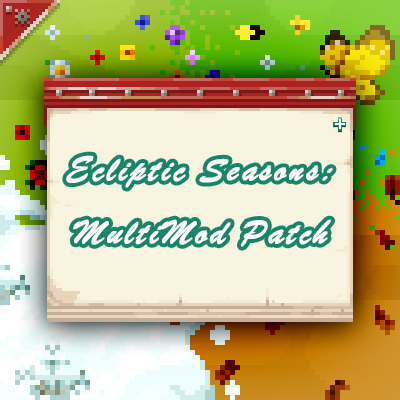
<style>
.page{position:relative;width:400px;height:400px;background:#f8f4e0}
.page>*{position:absolute;margin:0}
.t1{font:36px "STXingkai";letter-spacing:0.075em;color:#ffffff;font-weight:bold;font-style:italic}
</style>
<div class="page">
<p class="t1" style="left:66px;top:155px;width:267px;height:92px;text-align:center">Ecliptic Seasons:<br>MultiMod Patch</p>
</div>
